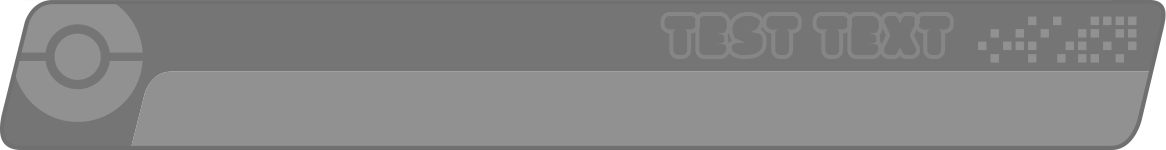
<style>
.page{position:relative;width:1166px;height:150px;background:#919191}
.page>*{position:absolute;margin:0}
.t1{font:12px/150px "chocolatecake";color:#868686}
</style>
<div class="page">
<p class="t1" style="left:660px;top:12px;width:294px;height:47px;text-align:right">test text</p>
</div>
